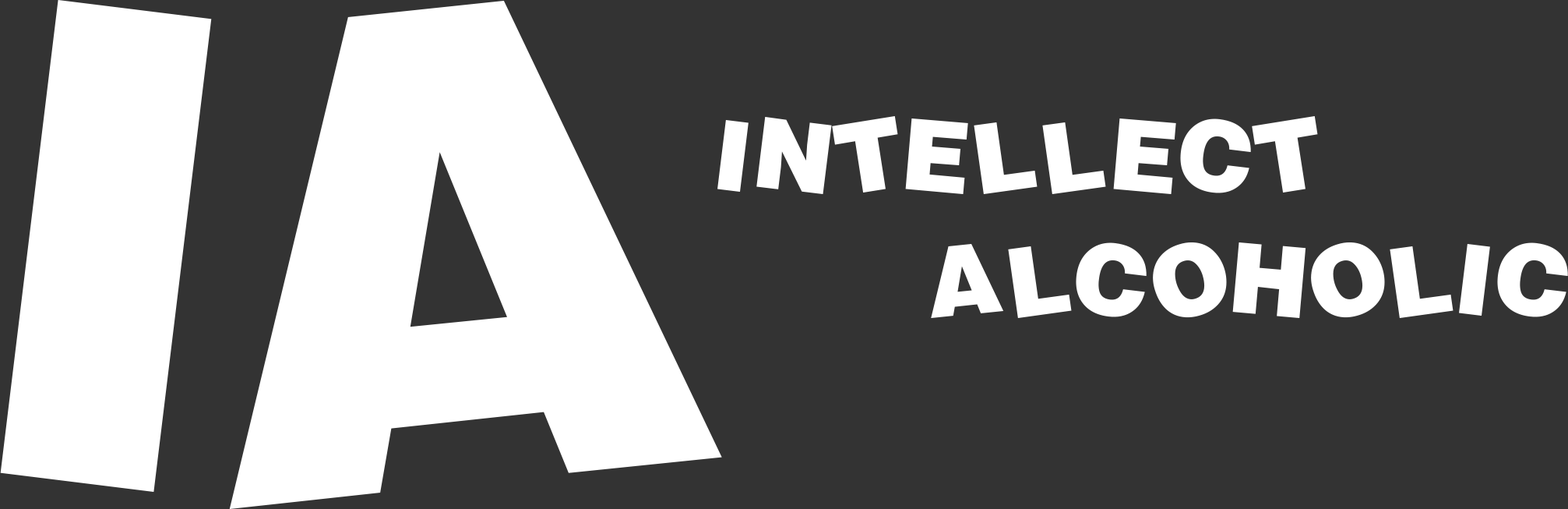
<style>
.page{position:relative;width:1568px;height:509px;background:#333333}
.page>*{position:absolute;margin:0}
.t1{font:654.4px "Soopafresh";color:#ffffff}
.t2{font:96.1px "Soopafresh";letter-spacing:0.08em;color:#ffffff}
</style>
<div class="page">
<p class="t1" style="left:0px;top:0px;width:722px;height:509px">IA</p>
<p class="t2" style="left:717px;top:116px;width:601px;height:78px">INTELLECT</p>
<p class="t2" style="left:931px;top:242px;width:637px;height:76px">ALCOHOLIC</p>
</div>
